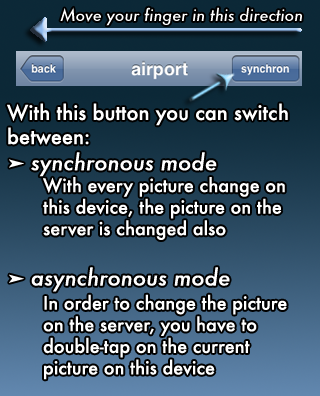
<style>
.page{position:relative;width:320px;height:396px}
.page>*{position:absolute;margin:0}
.t1{font:16px "Futura-MediumItalic";color:#ffffff}
.t2{font:18px "Futura-Medium";color:#ffffff}
.t3{font:20px "Futura-Medium";color:#ffffff}
.t4{font:20px "ArialUnicodeMS";color:#ffffff}
.t5{font:22px "Futura-MediumItalic";color:#ffffff}
</style>
<div class="page">
<p class="t1" style="left:60px;top:7px;width:242px;height:19px">Move your finger in this direction</p>
<p class="t2" style="left:7px;top:103px;width:281px;height:277px"><span class="t3">With this button you can switch<br>between:<br></span><span class="t4">➤ </span><span class="t5">synchronous mode<br></span> With every picture change on<br> this device, the picture on the <br> server is changed also<br><br><span class="t4">➤ </span><span class="t5">asynchronous mode<br> </span>In order to change the picture<br> on the server, you have to <br> double-tap on the current <br> picture on this device</p>
</div>
